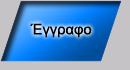
<style>
.page{position:relative;width:130px;height:70px;background:#c6c3c6}
.page>*{position:absolute;margin:0}
.t1{font:14.7px "ArialMT";color:#000000}
</style>
<div class="page">
<p class="t1" style="left:30px;top:23px;width:62px;height:15px">Έγγραφο</p>
</div>
